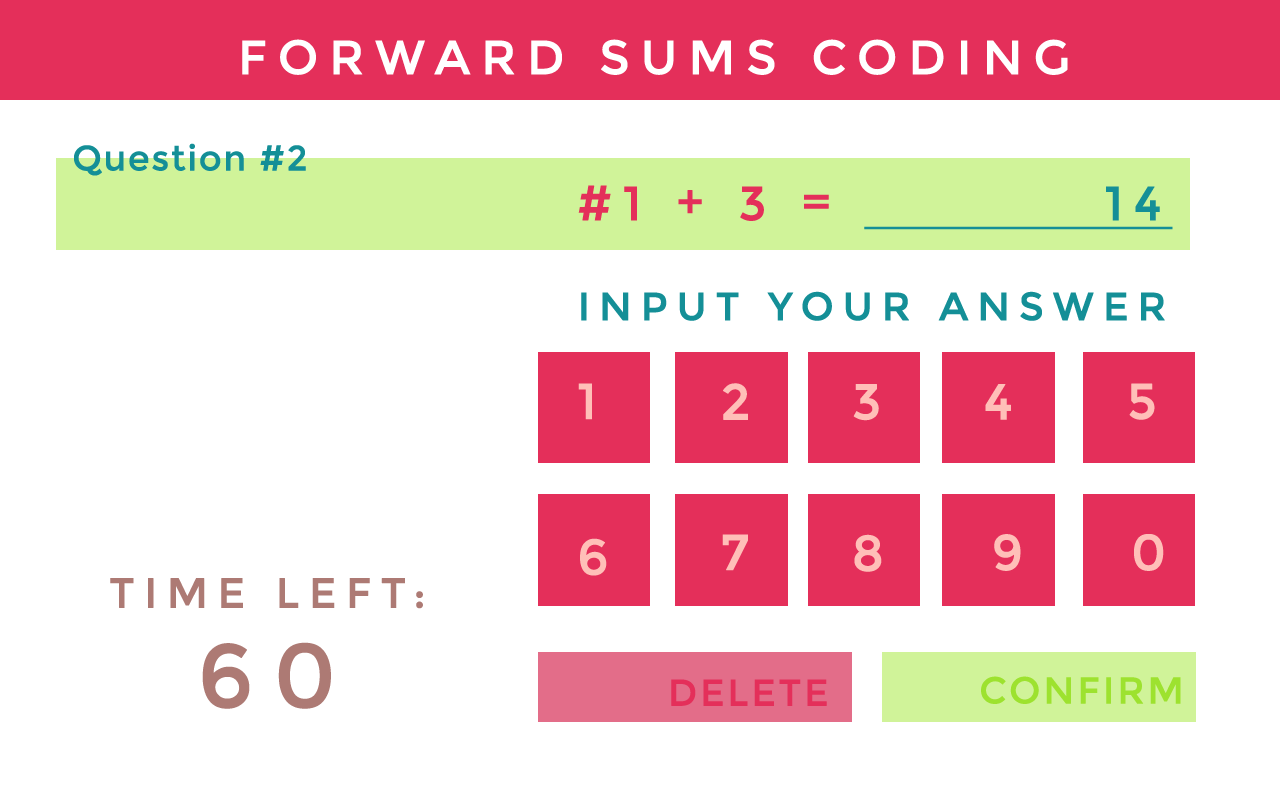
<style>
.page{position:relative;width:1280px;height:800px;background:#ffffff}
.page>*{position:absolute;margin:0}
.t1{font:48px "Montserrat-Regular";letter-spacing:0.2em;color:#ffffff;text-transform:uppercase;font-weight:bold}
.t2{font:35px "Montserrat-Regular";letter-spacing:0.025em;color:#148f97;font-weight:bold}
.t3{font:48px "Montserrat-Regular";letter-spacing:0.2em;color:#e42f5a;font-weight:bold}
.t4{font:48px "Montserrat-Regular";letter-spacing:0.2em;color:#148f97;font-weight:bold;text-decoration:underline}
.t5{font:39.3px "Montserrat-Regular";letter-spacing:0.2em;color:#148f97;text-transform:uppercase;font-weight:bold}
.t6{font:50.3px "Montserrat-Regular";letter-spacing:0.2em;color:#ffbfb8;text-transform:uppercase;font-weight:bold}
.t7{font:42px/99.9px "Montserrat-Regular";letter-spacing:0.2em;color:#ad7a74;text-transform:uppercase;font-weight:bold}
.t8{font:90px/99.9px "Montserrat-Regular";letter-spacing:0.2em;color:#ad7a74;text-transform:uppercase;font-weight:bold}
.t9{font:37.3px "Montserrat-Regular";letter-spacing:0.05em;color:#9de22f;text-transform:uppercase;font-weight:bold}
.t10{font:37.3px "Montserrat-Regular";letter-spacing:0.05em;color:#e42f5a;text-transform:uppercase;font-weight:bold}
</style>
<div class="page">
<p class="t1" style="left:242px;top:39px;width:826px;height:36px">Forward Sums Coding</p>
<p class="t2" style="left:74px;top:143px;width:232px;height:33px">Question #2</p>
<p class="t3" style="left:578px;top:185px;width:251px;height:36px">#1 + 3 =</p>
<p class="t4" style="left:864px;top:186px;width:309px;height:44px">14</p>
<p class="t5" style="left:581px;top:291px;width:584px;height:30px">Input your Answer</p>
<p class="t6" style="left:578px;top:383px;width:14px;height:37px">1</p>
<p class="t6" style="left:723px;top:383px;width:25px;height:37px">2</p>
<p class="t6" style="left:853px;top:384px;width:26px;height:37px">3</p>
<p class="t6" style="left:985px;top:384px;width:26px;height:36px">4</p>
<p class="t6" style="left:1129px;top:383px;width:26px;height:37px">5</p>
<p class="t6" style="left:722px;top:534px;width:26px;height:37px">7</p>
<p class="t6" style="left:854px;top:534px;width:28px;height:38px">8</p>
<p class="t6" style="left:994px;top:534px;width:27px;height:37px">9</p>
<p class="t6" style="left:1134px;top:534px;width:30px;height:37px">0</p>
<p class="t6" style="left:580px;top:538px;width:27px;height:38px">6</p>
<p class="t7" style="left:110px;top:578px;width:313px;height:131px;text-align:center">Time Left: <br><span class="t8">60</span></p>
<p class="t9" style="left:981px;top:676px;width:200px;height:28px">Confirm</p>
<p class="t10" style="left:671px;top:679px;width:156px;height:27px">Delete</p>
</div>
